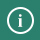
<style>
.page{position:relative;width:40px;height:40px;background:#2b7f6d}
.page>*{position:absolute;margin:0}
.t1{font:18px "Times-Bold";letter-spacing:0.2em;color:#ffffff}
</style>
<div class="page">
<p class="t1" style="left:18px;top:14px;width:5px;height:13px">i</p>
</div>
